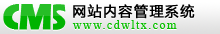
<style>
.page{position:relative;width:220px;height:34px}
.page>*{position:absolute;margin:0}
.t1{font:37px "ErasITC-Bold";letter-spacing:-0.05em;font-weight:bold}
.t2{font:14px "MicrosoftYaHei";letter-spacing:0.075em;font-weight:bold}
.t3{font:14px "MicrosoftYaHei";letter-spacing:0.075em;color:#000000;font-weight:bold}
.t4{font:12px "TimesNewRomanPSMT";letter-spacing:0.12em}
.t5{font:12px "TimesNewRomanPSMT";letter-spacing:0.12em;color:#0abf01}
</style>
<div class="page">
<p class="t1" style="left:19px;top:4px;width:33px;height:26px">M</p>
<p class="t2" style="left:73px;top:5px;width:122px;height:15px">网站内容管理系统</p>
<p class="t3" style="left:73px;top:4px;width:122px;height:15px">网站内容管理系统</p>
<p class="t4" style="left:72px;top:21px;width:105px;height:9px">www.cdwltx.com</p>
<p class="t5" style="left:72px;top:20px;width:105px;height:9px">www.cdwltx.com</p>
</div>
